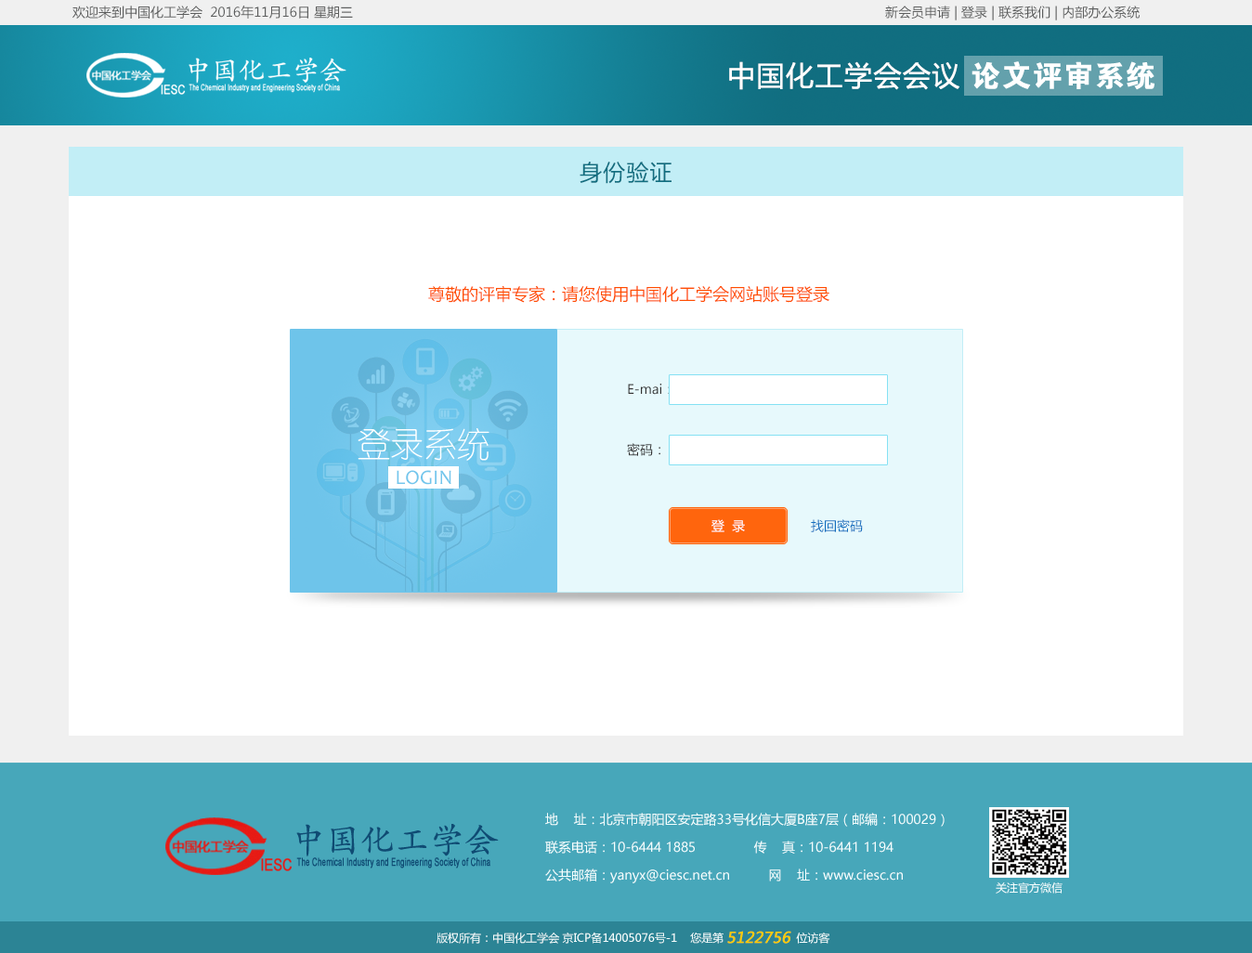
<style>
.page{position:relative;width:1252px;height:953px;background:#ffffff}
.page>*{position:absolute;margin:0}
.t1{font:13px "MicrosoftYaHei";color:#5d5e5e}
.t2{font:27.9px "MicrosoftYaHei";letter-spacing:0.05em;color:#ffffff}
.t3{font:29.6px "FZDHTJW--GB1-0";letter-spacing:0.05em;color:#ffffff}
.t4{font:22.3px "MicrosoftYaHei";letter-spacing:0.05em;color:#116e80}
.t5{font:16.7px "MicrosoftYaHei";color:#ff4e00}
.t6{font:13px "MicrosoftYaHei";color:#333333}
.t7{font:33.4px "FZY1JW--GB1-0";color:#ffffff}
.t8{font:20.9px "Candara";color:#72c6ec}
.t9{font:13px "MicrosoftYaHei";color:#ffffff}
.t10{font:13px "MicrosoftYaHei";color:#116fbf}
.t11{font:13px/27.9px "MicrosoftYaHei";color:#f4ffff}
.t12{font:11.1px "MicrosoftYaHei";color:#f4ffff}
.t13{font:14.9px "MicrosoftYaHei";color:#ffcc00;font-weight:bold;font-style:italic}
</style>
<div class="page">
<p class="t1" style="left:72px;top:6px;width:281px;height:13px">欢迎来到中国化工学会  2016年11月16日 星期三</p>
<p class="t1" style="left:885px;top:6px;width:254px;height:14px">新会员申请 | 登录 | 联系我们 | 内部办公系统</p>
<p class="t2" style="left:729px;top:61px;width:230px;height:29px">中国化工学会会议</p>
<p class="t3" style="left:971px;top:61px;width:183px;height:29px">论文评审系统</p>
<p class="t4" style="left:579px;top:162px;width:92px;height:22px">身份验证</p>
<p class="t5" style="left:428px;top:285px;width:401px;height:18px">尊敬的评审专家：请您使用中国化工学会网站账号登录</p>
<p class="t6" style="left:628px;top:383px;width:42px;height:12px">E-mai：</p>
<p class="t7" style="left:357px;top:428px;width:132px;height:33px">登录系统</p>
<p class="t6" style="left:627px;top:443px;width:33px;height:13px">密码：</p>
<p class="t8" style="left:396px;top:470px;width:55px;height:15px">LOGIN</p>
<p class="t9" style="left:711px;top:519px;width:34px;height:13px">登  录</p>
<p class="t10" style="left:811px;top:519px;width:52px;height:13px">找回密码</p>
<p class="t11" style="left:545px;top:812px;width:399px;height:71px">地    址：北京市朝阳区安定路33号化信大厦B座7层（邮编：100029）<br>联系电话：10-6444 1885               传    真：10-6441 1194<br>公共邮箱：yanyx@ciesc.net.cn          网    址：www.ciesc.cn</p>
<p class="t12" style="left:995px;top:882px;width:67px;height:11px">关注官方微信</p>
<p class="t12" style="left:436px;top:931px;width:394px;height:12px">版权所有：中国化工学会 京ICP备14005076号-1    您是第                      位访客</p>
<p class="t13" style="left:727px;top:930px;width:64px;height:13px">5122756</p>
</div>
